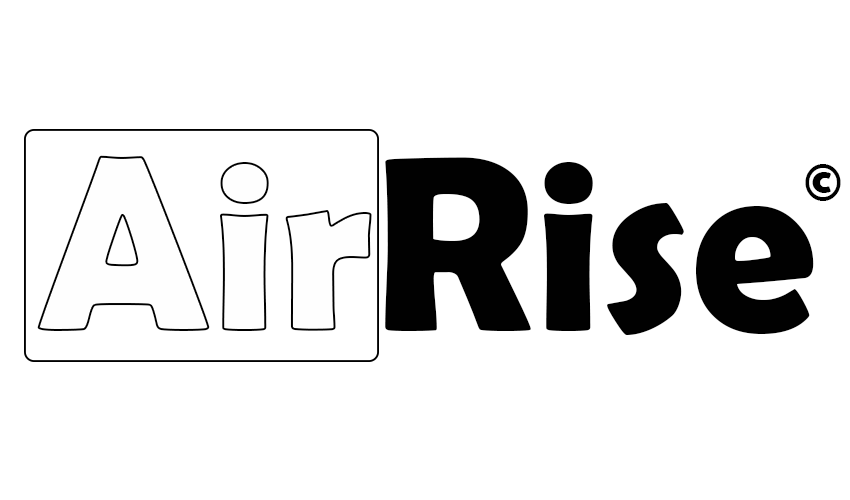
<style>
.page{position:relative;width:850px;height:500px;background:#ffffff}
.page>*{position:absolute;margin:0}
.t1{font:250px "BerlinSansFBDemi-Bold";color:#010101}
.t2{font:250px "BerlinSansFBDemi-Bold";color:#fefefe}
.t3{font:60px "BerlinSansFBDemi-Bold";color:#000000}
</style>
<div class="page">
<p class="t1" style="left:37px;top:155px;width:777px;height:180px"><span class="t2">Air</span>Rise</p>
<p class="t3" style="left:805px;top:164px;width:36px;height:37px">©</p>
</div>
